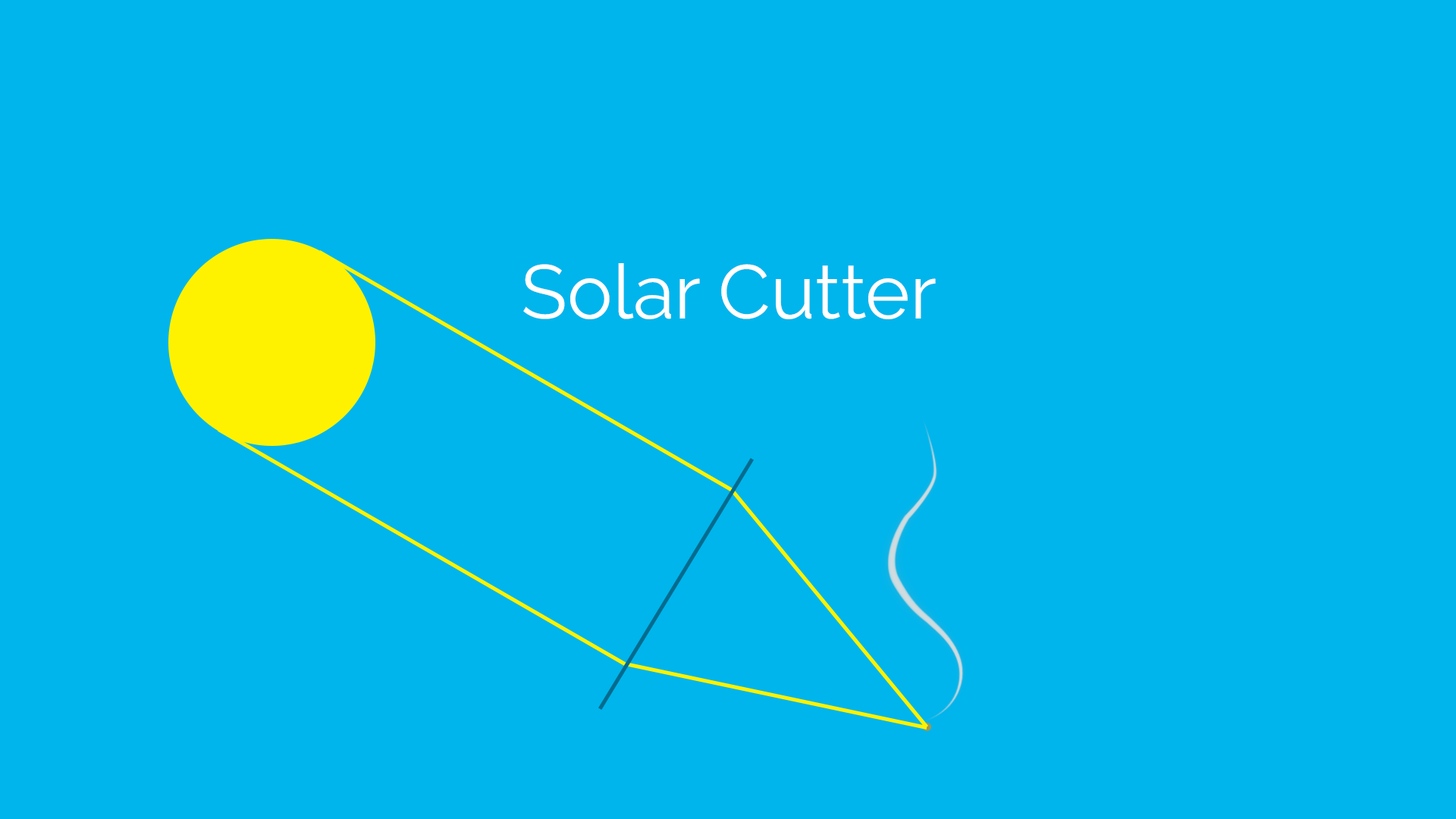
<style>
.page{position:relative;width:1456px;height:819px;background:#00b5ec}
.page>*{position:absolute;margin:0}
.t1{font:75.8px "Raleway-Regular";color:#ffffff}
</style>
<div class="page">
<p class="t1" style="left:523px;top:263px;width:413px;height:56px">Solar Cutter</p>
</div>
